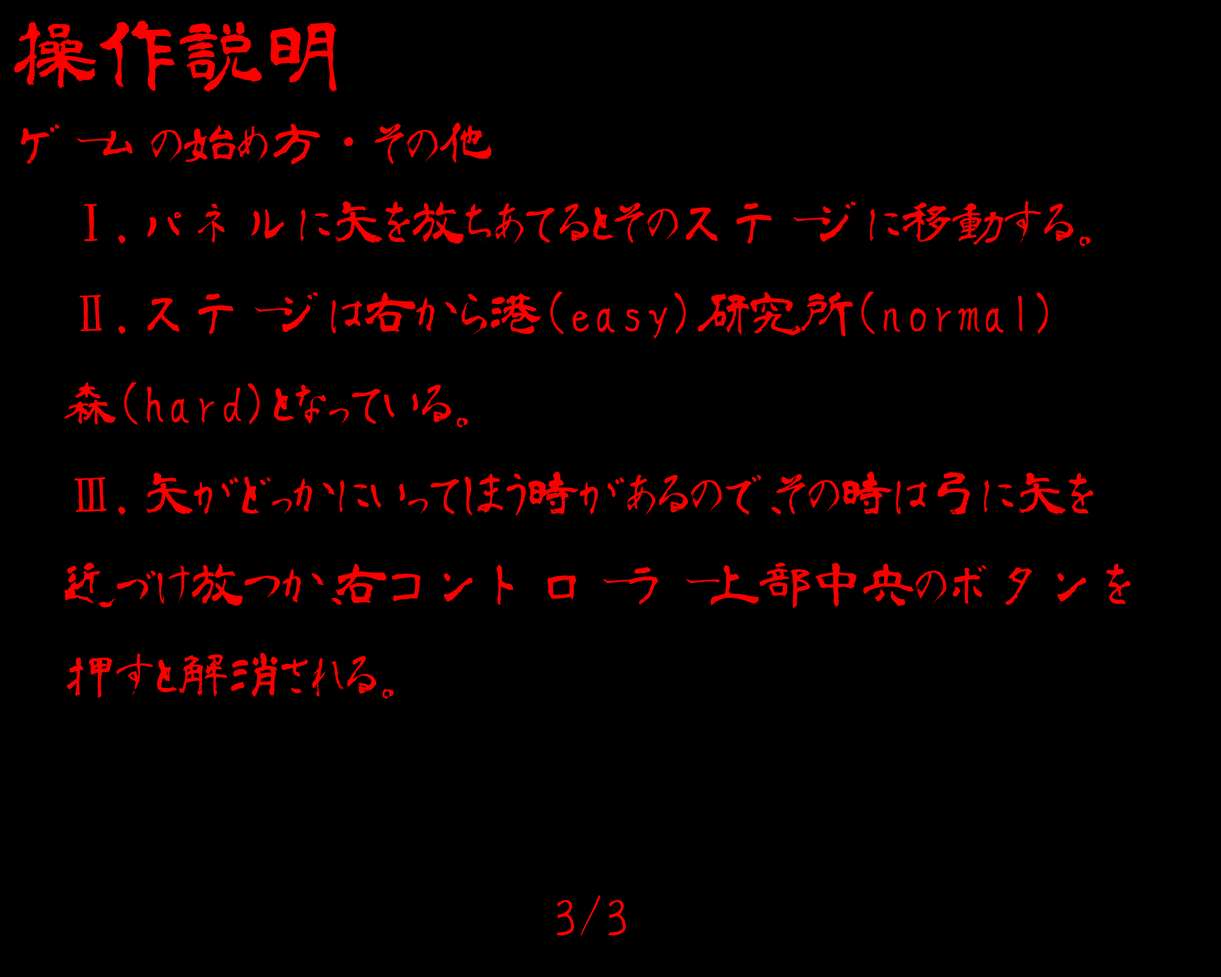
<style>
.page{position:relative;width:1221px;height:977px;background:#000000}
.page>*{position:absolute;margin:0}
.t1{font:82.7px "aoyagireisyosimo2";color:#ff0000}
.t2{font:51.7px "aoyagireisyosimo2";color:#fa0000}
.t3{font:51.7px "aoyagireisyosimo2";color:#ff0000}
</style>
<div class="page">
<p class="t1" style="left:14px;top:21px;width:323px;height:71px">操作説明</p>
<p class="t2" style="left:21px;top:122px;width:471px;height:43px">ゲームの始め方・その他</p>
<p class="t2" style="left:64px;top:201px;width:1066px;height:498px">Ⅰ.パネルに矢を放ちあてるとそのステージに移動する。<br>Ⅱ.ステージは右から港(easy)研究所(normal)<br>森(hard)となっている。<br>Ⅲ.矢がどっかにいってしまう時があるので、その時は弓に矢を<br>近づけ放つか、右コントローラー上部中央のボタンを<br>押すと解消される。</p>
<p class="t3" style="left:557px;top:895px;width:69px;height:40px">3/3</p>
</div>
